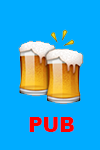
<style>
.page{position:relative;width:100px;height:150px;background:#00acff}
.page>*{position:absolute;margin:0}
.t1{font:20px "Arial-Black";color:#ff0000}
</style>
<div class="page">
<p class="t1" style="left:29px;top:117px;width:45px;height:15px">PUB</p>
</div>
